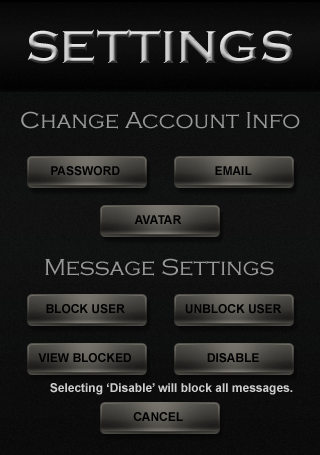
<style>
.page{position:relative;width:320px;height:455px}
.page>*{position:absolute;margin:0}
.t1{font:47.8px "CopperplateGothic-Bold"}
.t2{font:23.9px "CopperplateGothic-Light";color:#989898}
.t3{font:12px "Arial-BoldMT";color:#000000}
.t4{font:12px "Arial-BoldMT";color:#cdcdcd}
</style>
<div class="page">
<p class="t1" style="left:27px;top:29px;width:266px;height:36px">SETTINGS</p>
<p class="t2" style="left:21px;top:111px;width:279px;height:18px">Change Account Info</p>
<p class="t3" style="left:51px;top:166px;width:69px;height:10px">PASSWORD</p>
<p class="t3" style="left:215px;top:166px;width:37px;height:9px">EMAIL</p>
<p class="t3" style="left:134px;top:215px;width:48px;height:9px">AVATAR</p>
<p class="t2" style="left:45px;top:258px;width:229px;height:18px">Message Settings</p>
<p class="t3" style="left:46px;top:304px;width:79px;height:10px">BLOCK USER</p>
<p class="t3" style="left:185px;top:304px;width:97px;height:10px">UNBLOCK USER</p>
<p class="t3" style="left:38px;top:353px;width:93px;height:10px">VIEW BLOCKED</p>
<p class="t3" style="left:207px;top:353px;width:52px;height:10px">DISABLE</p>
<p class="t4" style="left:50px;top:383px;width:243px;height:12px">Selecting ‘Disable’ will block all messages.</p>
<p class="t3" style="left:133px;top:412px;width:50px;height:9px">CANCEL</p>
</div>
